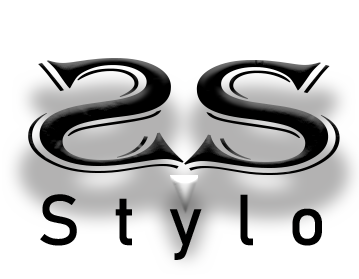
<style>
.page{position:relative;width:359px;height:279px;background:#ffffff}
.page>*{position:absolute;margin:0}
.t1{font:166.7px "Algerian";letter-spacing:0.28em;color:#000000;scale:1.68 1}
.t2{font:166.7px "Algerian";letter-spacing:0.44em;color:#000000;scale:1.68 1}
.t3{font:70.8px "Bahnschrift";letter-spacing:0.46em;color:#000000}
</style>
<div class="page">
<p class="t1" style="left:28px;top:58px;width:156px;height:115px;rotate:180deg">S</p>
<p class="t2" style="left:184px;top:60px;width:156px;height:115px">S</p>
<p class="t3" style="left:40px;top:194px;width:282px;height:66px">Stylo</p>
</div>
